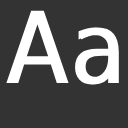
<style>
.page{position:relative;width:128px;height:128px;background:#333333}
.page>*{position:absolute;margin:0}
.t1{font:99px "DejaVuSansCondensed";color:#ffffff;font-weight:bold}
</style>
<div class="page">
<p class="t1" style="left:6px;top:10px;width:113px;height:75px">Aa</p>
</div>
